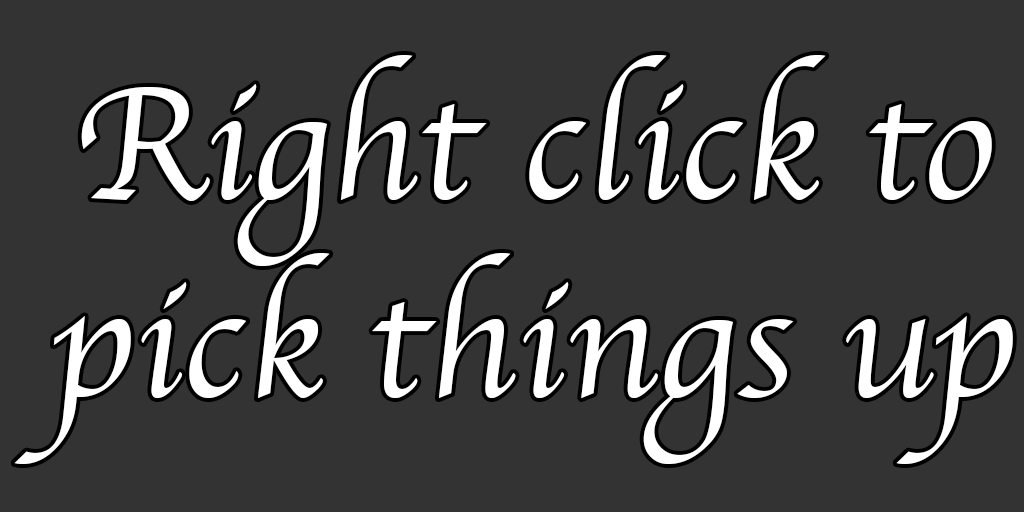
<style>
.page{position:relative;width:1024px;height:512px;background:#333333}
.page>*{position:absolute;margin:0}
.t1{font:165.3px "Apple-Chancery";color:#ffffff}
</style>
<div class="page">
<p class="t1" style="left:14px;top:55px;width:999px;height:409px;text-align:center">Right click to<br>pick things up</p>
</div>
